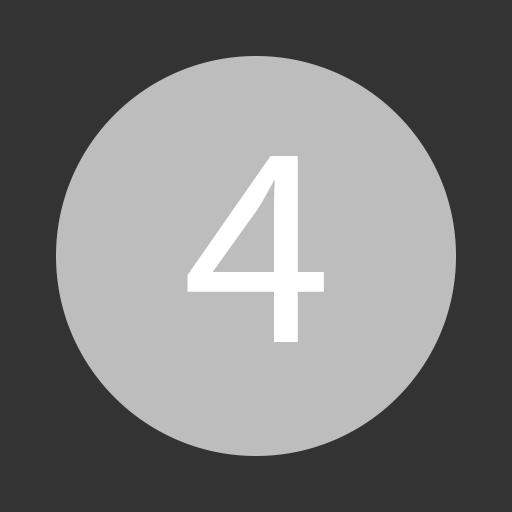
<style>
.page{position:relative;width:512px;height:512px;background:#333333}
.page>*{position:absolute;margin:0}
.t1{font:286px "MyriadPro-Regular";color:#ffffff}
</style>
<div class="page">
<p class="t1" style="left:187px;top:156px;width:137px;height:186px">4</p>
</div>
